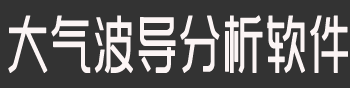
<style>
.page{position:relative;width:350px;height:88px;background:#333333}
.page>*{position:absolute;margin:0}
.t1{font:63.2px "SJxinhei-Regular";color:#fcf5f5;scale:0.68 1}
</style>
<div class="page">
<p class="t1" style="left:8px;top:15px;width:340px;height:58px">大气波导分析软件</p>
</div>
